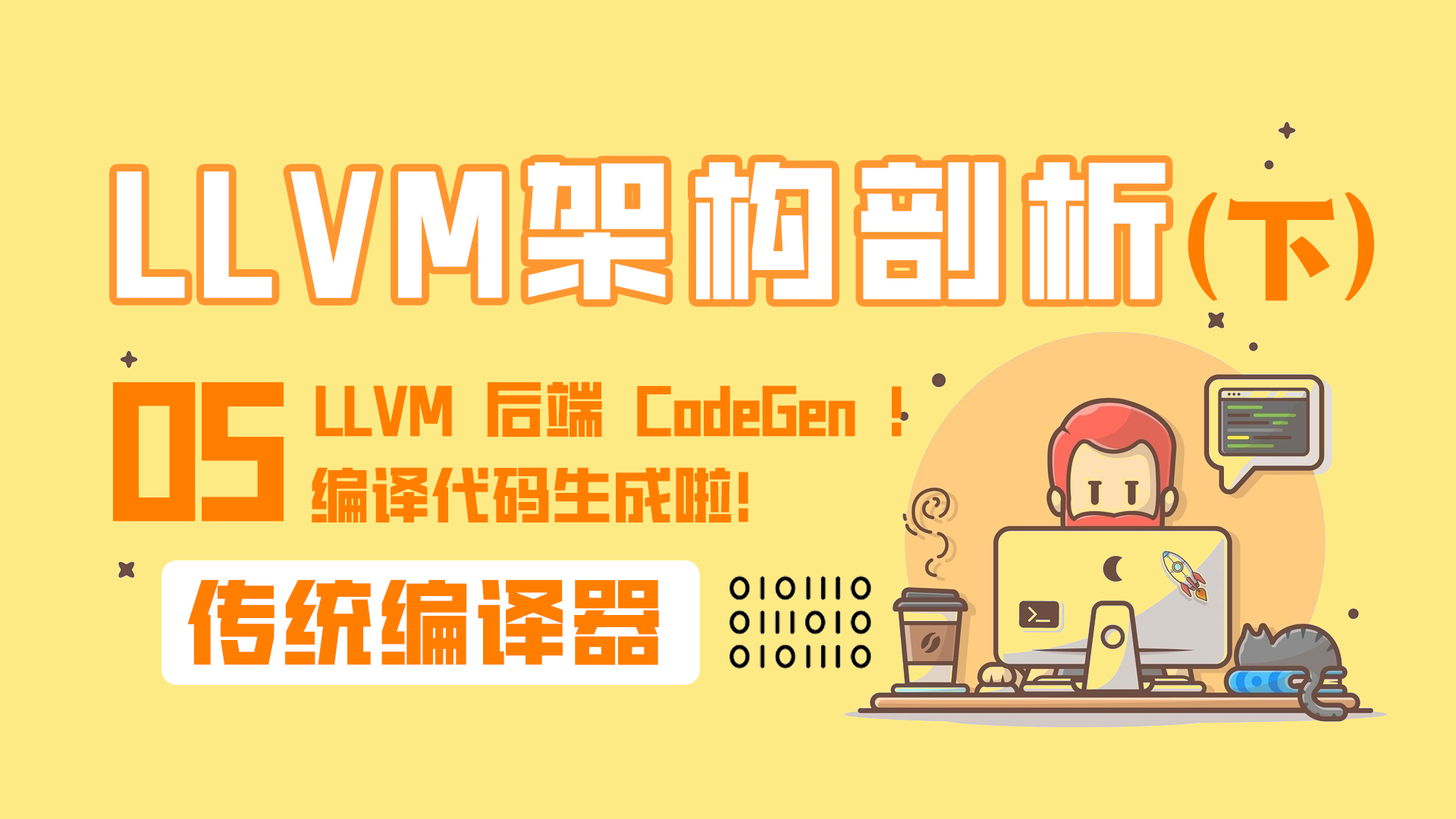
<style>
.page{position:relative;width:1456px;height:819px;background:#feea85}
.page>*{position:absolute;margin:0}
.t1{font:151.7px "HGGTZHVF-Medium";letter-spacing:0.1em;color:#ffffff}
.t2{font:121.3px "095-SSKunLunTi";color:#ff7e00}
.t3{font:166.8px "HGGTZHVF-Medium";letter-spacing:-0.01em;color:#ff7e00}
.t4{font:60.7px "HGGTZHVF-Medium";color:#ff7e00;font-weight:bold}
.t5{font:93.8px "HGGTZHVF-Medium";letter-spacing:0.025em;color:#ff7e00;font-weight:bold}
</style>
<div class="page">
<p class="t1" style="left:117px;top:162px;width:1049px;height:138px">LLVM架构剖析</p>
<p class="t2" style="left:1188px;top:192px;width:187px;height:109px">(下)</p>
<p class="t3" style="left:113px;top:382px;width:171px;height:140px">05</p>
<p class="t4" style="left:315px;top:381px;width:587px;height:56px">LLVM 后端 CodeGen ！</p>
<p class="t4" style="left:312px;top:467px;width:436px;height:55px">编译代码生成啦！</p>
<p class="t5" style="left:187px;top:579px;width:472px;height:86px">传统编译器</p>
</div>
